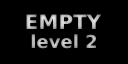
<style>
.page{position:relative;width:128px;height:64px;background:#000000}
.page>*{position:absolute;margin:0}
.t1{font:20px "BitstreamVeraSans-Bold";color:#c1c1c1}
.t2{font:18px "BitstreamVeraSans-Bold";color:#b0b0b0}
</style>
<div class="page">
<p class="t1" style="left:26px;top:14px;width:76px;height:15px">EMPTY</p>
<p class="t2" style="left:31px;top:34px;width:65px;height:15px">level 2</p>
</div>
